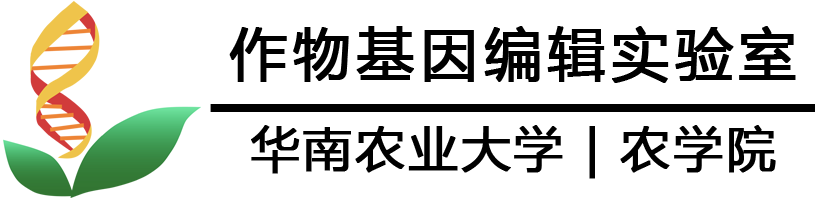
<style>
.page{position:relative;width:830px;height:200px;background:#ffffff}
.page>*{position:absolute;margin:0}
.t1{font:48.5px/49.3px "MicrosoftYaHei";letter-spacing:0.06em;color:#000000;font-weight:bold}
.t2{font:56.5px/49.3px "MicrosoftYaHei";letter-spacing:0.1em;color:#000000;font-weight:bold}
.t3{font:58.7px/49.3px "Impact";color:#000000;font-weight:bold}
</style>
<div class="page">
<p class="t1" style="left:210px;top:26px;width:605px;height:153px;text-align:center"><span class="t2">作物基因编辑实验室<br></span><span class="t3">——————————<br></span>华南农业大学 | 农学院</p>
</div>
